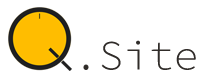
<style>
.page{position:relative;width:204px;height:78px;background:#ffffff}
.page>*{position:absolute;margin:0}
.t1{font:41.7px "SourceCodeRoman-Light";color:#302c29}
</style>
<div class="page">
<p class="t1" style="left:83px;top:40px;width:113px;height:30px">.Site</p>
</div>
